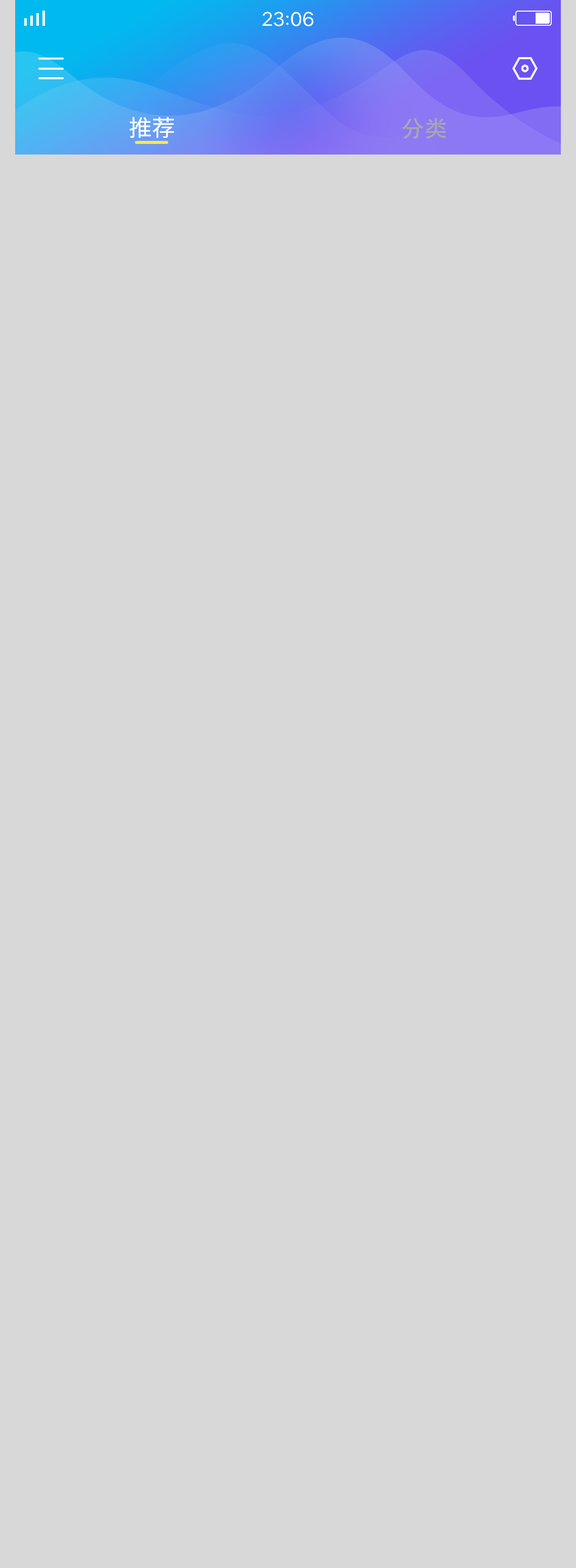
<style>
.page{position:relative;width:576px;height:1568px;background:#d8d8d8}
.page>*{position:absolute;margin:0}
.t1{font:22.7px "NotoSansHans-Regular";color:#ffffff}
.t2{font:22.7px "AdobeHeitiStd-Regular";color:#a9a9a9}
</style>
<div class="page">
<p class="t1" style="left:129px;top:117px;width:45px;height:21px">推荐</p>
<p class="t2" style="left:401px;top:118px;width:45px;height:21px">分类</p>
</div>
